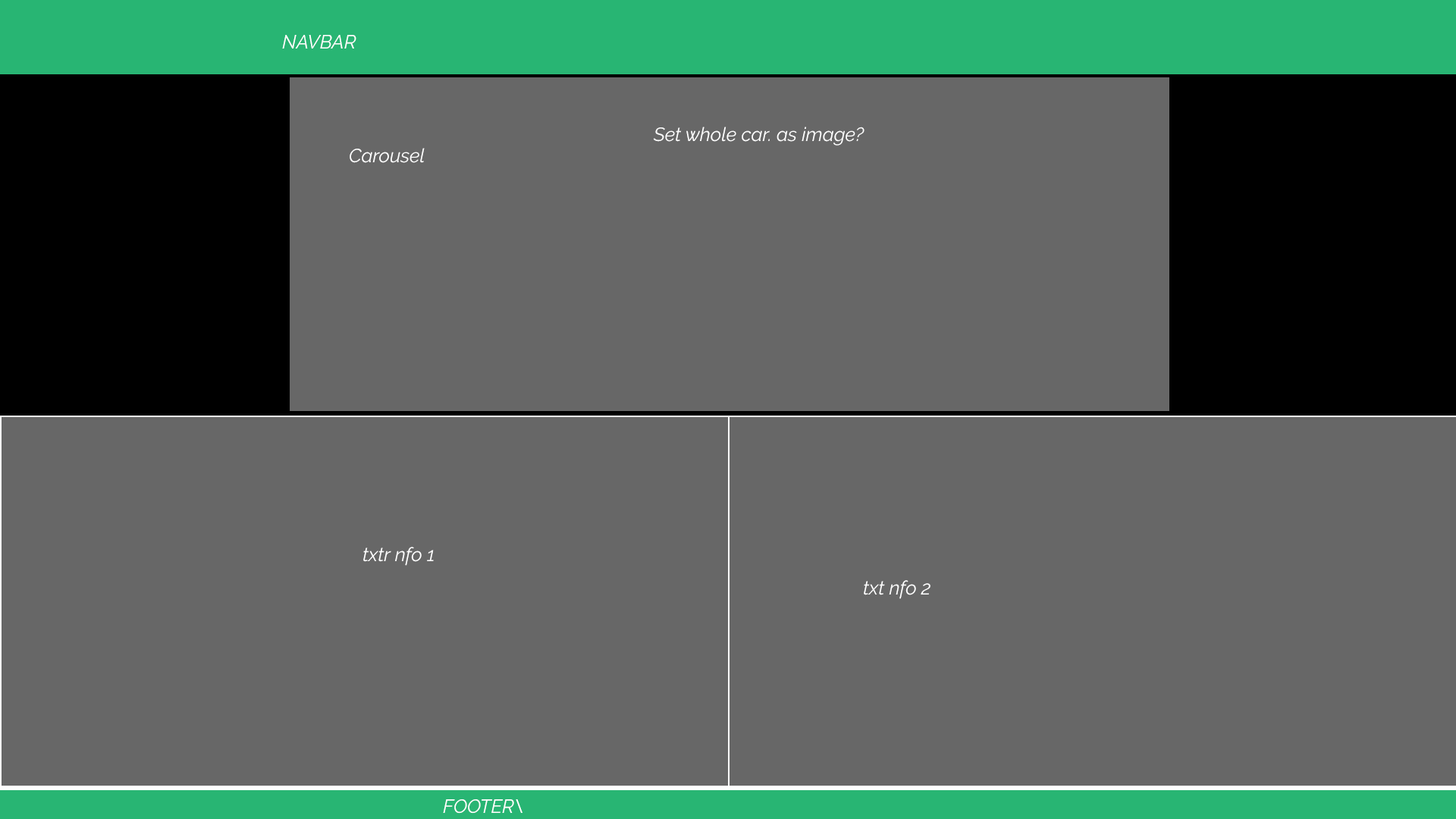
<style>
.page{position:relative;width:1456px;height:819px;background:#676767}
.page>*{position:absolute;margin:0}
.t1{font:19.1px "Raleway-Italic";color:#ffffff}
</style>
<div class="page">
<p class="t1" style="left:282px;top:35px;width:74px;height:14px">NAVBAR</p>
<p class="t1" style="left:653px;top:127px;width:211px;height:19px">Set whole car. as image?</p>
<p class="t1" style="left:350px;top:148px;width:75px;height:15px">Carousel</p>
<p class="t1" style="left:363px;top:547px;width:71px;height:19px">txtr nfo 1</p>
<p class="t1" style="left:864px;top:580px;width:66px;height:19px">txt nfo 2</p>
<p class="t1" style="left:443px;top:799px;width:79px;height:15px">FOOTER\</p>
</div>
